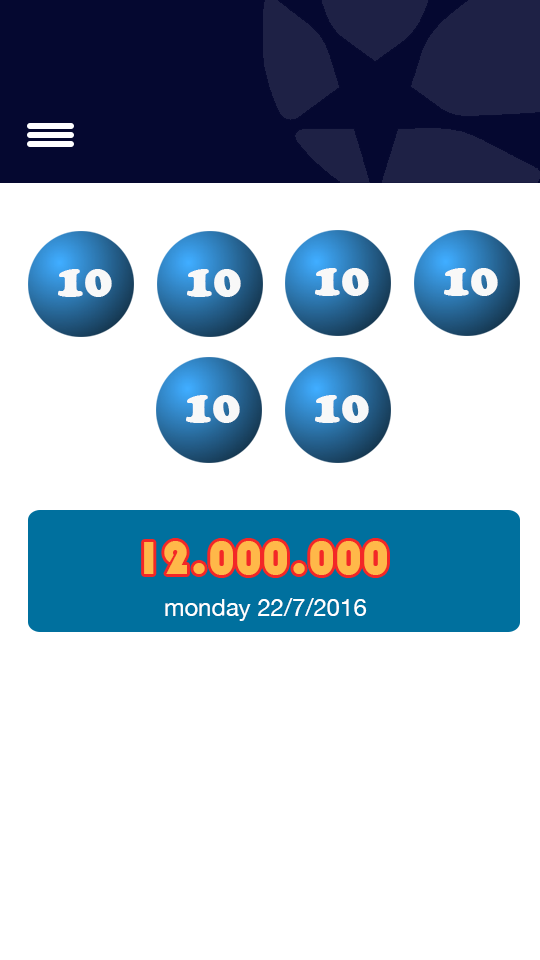
<style>
.page{position:relative;width:540px;height:960px;background:#ffffff}
.page>*{position:absolute;margin:0}
.t1{font:48px "CooperBlack";color:#f8f8f8}
.t2{font:48px "Bauhaus93";color:#ffb849}
.t3{font:24px "HelveticaNeue-Regular";color:#ffffff}
</style>
<div class="page">
<p class="t1" style="left:58px;top:269px;width:54px;height:28px">10</p>
<p class="t1" style="left:187px;top:269px;width:54px;height:28px">10</p>
<p class="t1" style="left:315px;top:268px;width:54px;height:28px">10</p>
<p class="t1" style="left:444px;top:268px;width:54px;height:28px">10</p>
<p class="t1" style="left:186px;top:395px;width:54px;height:28px">10</p>
<p class="t1" style="left:315px;top:395px;width:54px;height:28px">10</p>
<p class="t2" style="left:144px;top:541px;width:243px;height:34px">12.000.000</p>
<p class="t3" style="left:165px;top:598px;width:202px;height:23px">monday 22/7/2016</p>
</div>
